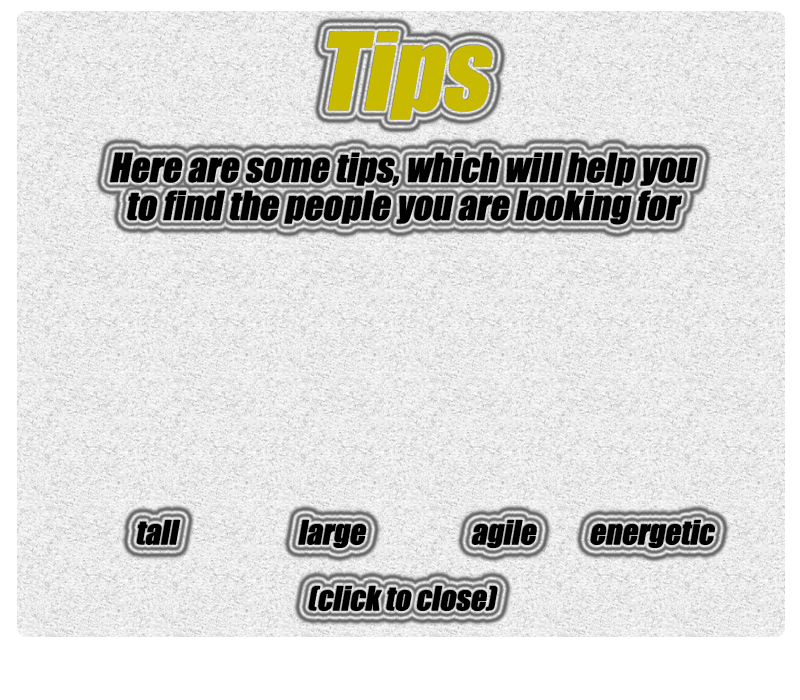
<style>
.page{position:relative;width:800px;height:700px}
.page>*{position:absolute;margin:0}
.t1{font:99px "Impact";color:#c7ba00;font-style:italic}
.t2{font:37px/38px "Impact";color:#000000;font-style:italic}
.t3{font:31px "Impact";color:#000000;font-style:italic}
</style>
<div class="page">
<p class="t1" style="left:327px;top:32px;width:166px;height:88px">Tips</p>
<p class="t2" style="left:110px;top:152px;width:588px;height:73px;text-align:center">Here are some tips, which will help you to find the people you are looking for</p>
<p class="t3" style="left:136px;top:520px;width:45px;height:25px">tall</p>
<p class="t3" style="left:298px;top:520px;width:69px;height:28px">large</p>
<p class="t3" style="left:472px;top:520px;width:65px;height:28px">agile</p>
<p class="t3" style="left:590px;top:520px;width:125px;height:28px">energetic</p>
<p class="t3" style="left:308px;top:586px;width:190px;height:25px">(click to close)</p>
</div>
